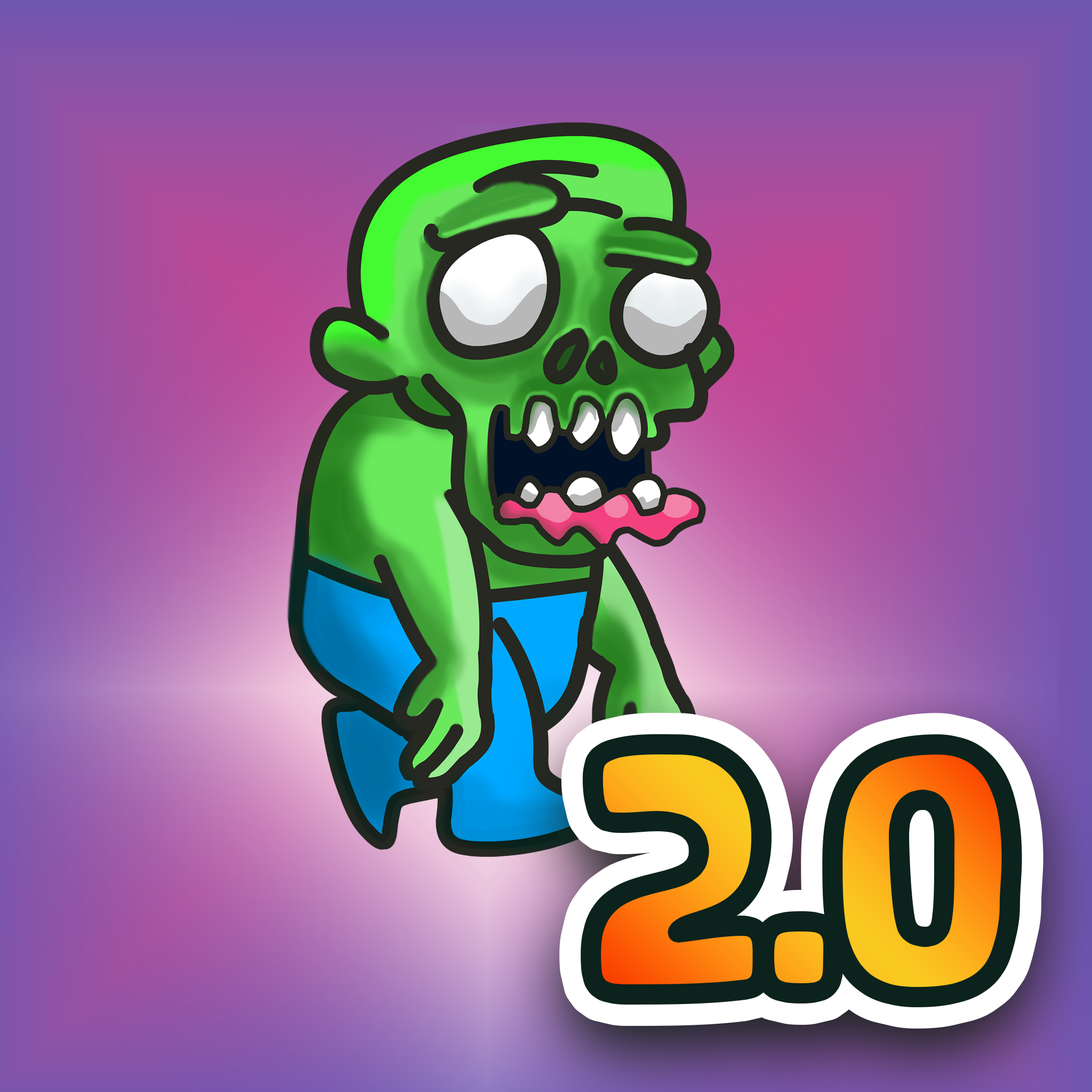
<style>
.page{position:relative;width:1092px;height:1092px}
.page>*{position:absolute;margin:0}
.t1{font:327.4px "Ourland";letter-spacing:-0.04em}
</style>
<div class="page">
<p class="t1" style="left:591px;top:744px;width:421px;height:253px">2.0</p>
<p class="t1" style="left:591px;top:744px;width:421px;height:253px">2.0</p>
</div>
